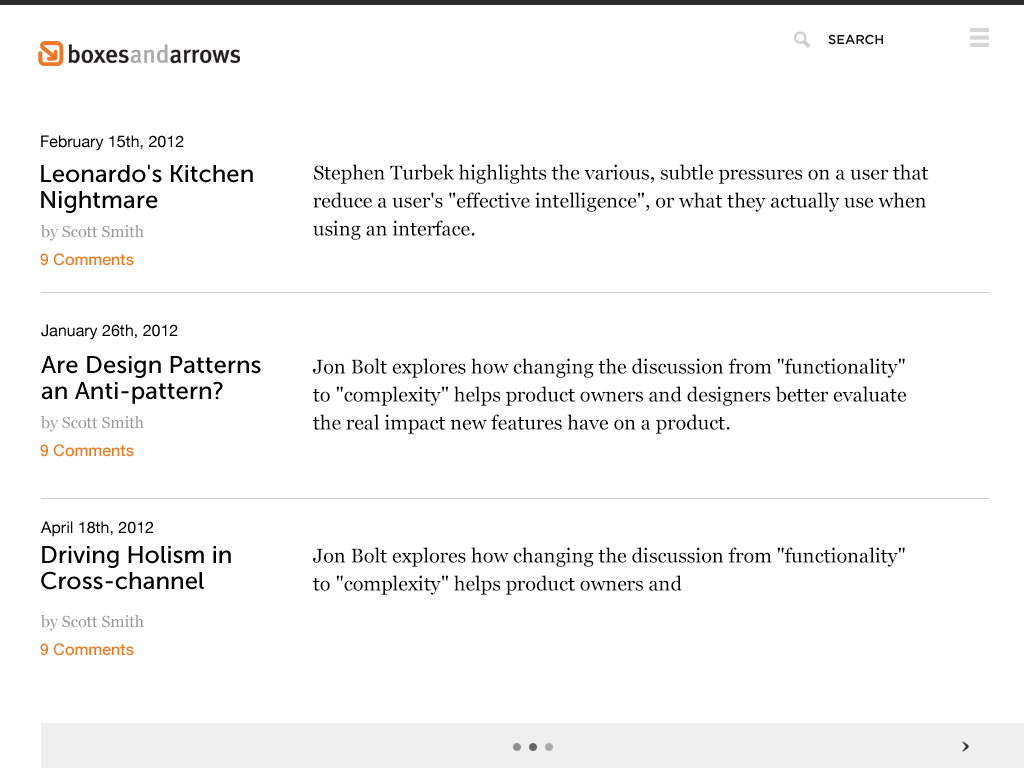
<style>
.page{position:relative;width:1024px;height:768px;background:#ffffff}
.page>*{position:absolute;margin:0}
.t1{font:13px "Gotham-Medium";color:#161616}
.t2{font:16px "HelveticaNeue";color:#000000}
.t3{font:24px/26px "MuseoSans-500";letter-spacing:0.005em;color:#000000}
.t4{font:20px/28px "Georgia";color:#000000}
.t5{font:16px "Georgia";color:#999999}
.t6{font:16px "HelveticaNeue-Medium";color:#ef7a17}
.t7{font:24px "Georgia-Bold";color:#333333}
</style>
<div class="page">
<p class="t1" style="left:828px;top:34px;width:55px;height:11px">SEARCH</p>
<p class="t2" style="left:41px;top:135px;width:143px;height:16px">February 15th, 2012</p>
<p class="t3" style="left:41px;top:164px;width:212px;height:49px">Leonardo's Kitchen Nightmare</p>
<p class="t4" style="left:313px;top:164px;width:616px;height:76px">Stephen Turbek highlights the various, subtle pressures on a user that reduce a user's "effective intelligence", or what they actually use when using an interface.</p>
<p class="t5" style="left:40px;top:225px;width:104px;height:16px">by Scott Smith</p>
<p class="t6" style="left:40px;top:253px;width:94px;height:13px">9 Comments</p>
<p class="t2" style="left:41px;top:324px;width:137px;height:16px">January 26th, 2012</p>
<p class="t3" style="left:41px;top:356px;width:220px;height:48px">Are Design Patterns an Anti-pattern?</p>
<p class="t4" style="left:313px;top:358px;width:594px;height:76px">Jon Bolt explores how changing the discussion from "functionality" to "complexity" helps product owners and designers better evaluate the real impact new features have on a product.</p>
<p class="t5" style="left:40px;top:416px;width:104px;height:16px">by Scott Smith</p>
<p class="t6" style="left:40px;top:444px;width:94px;height:13px">9 Comments</p>
<p class="t2" style="left:41px;top:521px;width:112px;height:16px">April 18th, 2012</p>
<p class="t3" style="left:41px;top:546px;width:190px;height:44px">Driving Holism in Cross-channel Projects</p>
<p class="t4" style="left:313px;top:547px;width:592px;height:48px">Jon Bolt explores how changing the discussion from "functionality" to "complexity" helps product owners and</p>
<p class="t5" style="left:40px;top:615px;width:104px;height:16px">by Scott Smith</p>
<p class="t6" style="left:40px;top:643px;width:94px;height:13px">9 Comments</p>
<p class="t7" style="left:962px;top:741px;width:7px;height:11px">›</p>
</div>
